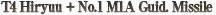
<style>
.page{position:relative;width:216px;height:15px;background:#ffffff}
.page>*{position:absolute;margin:0}
.t1{font:15px "RyuminPro-ExBold";letter-spacing:-0.08em;color:#4a3f32;font-weight:bold;scale:0.9 1}
</style>
<div class="page">
<p class="t1" style="left:0px;top:0px;width:213px;height:15px">T4 Hiryuu + No.1 M1A Guid. Missile</p>
</div>
